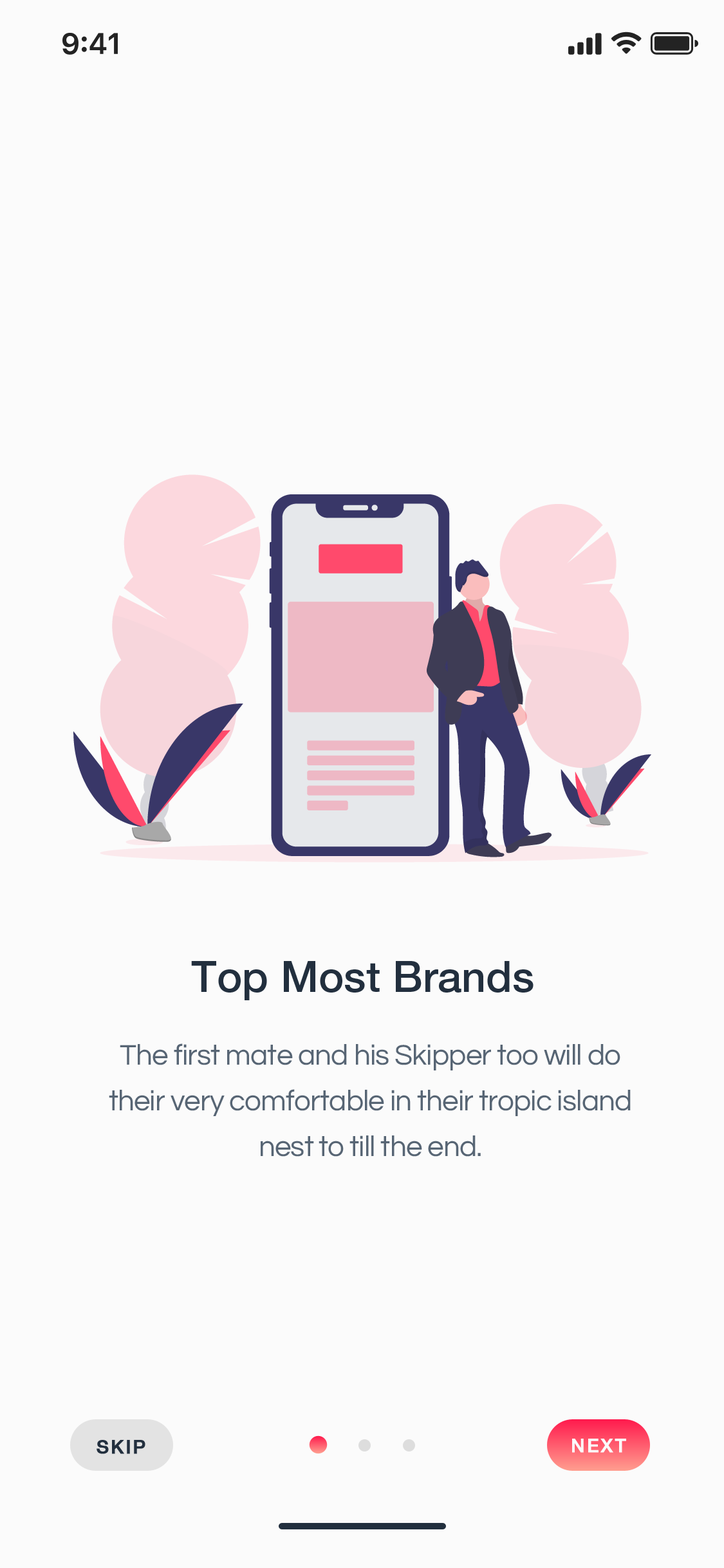
<style>
.page{position:relative;width:724px;height:1568px;background:#fbfbfb}
.page>*{position:absolute;margin:0}
.t1{font:42.9px "HelveticaNeue-Medium";color:#222f3e}
.t2{font:29.5px/45.6px "Questrial-Regular";letter-spacing:-0.02em;color:#576574}
.t3{font:18.8px "HelveticaNeue-Medium";letter-spacing:0.08em;color:#222f3e;font-weight:bold}
.t4{font:18.8px "HelveticaNeue-Medium";letter-spacing:0.08em;color:#fbfbfb;font-weight:bold}
</style>
<div class="page">
<p class="t1" style="left:191px;top:961px;width:343px;height:39px">Top Most Brands</p>
<p class="t2" style="left:109px;top:1043px;width:522px;height:114px;text-align:center">The first mate and his Skipper too will do their very comfortable in their tropic island nest to till the end.</p>
<p class="t3" style="left:97px;top:1440px;width:48px;height:14px">SKIP</p>
<p class="t4" style="left:572px;top:1439px;width:54px;height:14px">NEXT</p>
</div>
